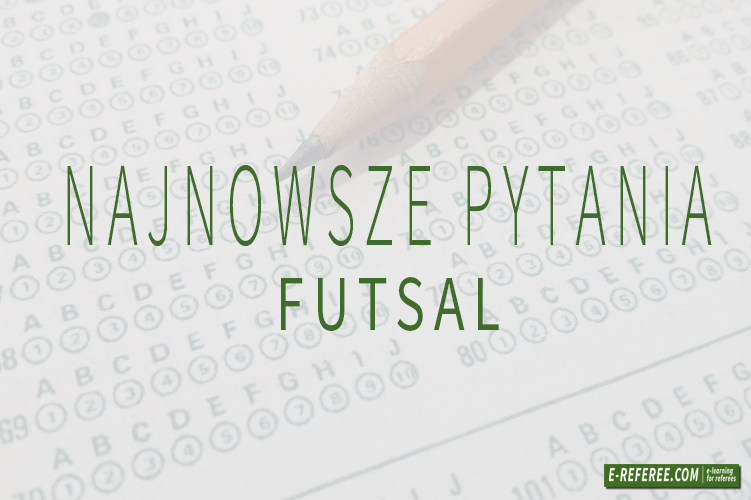
<style>
.page{position:relative;width:751px;height:500px}
.page>*{position:absolute;margin:0}
.t1{font:120px "SourceSansPro-Light";letter-spacing:0.16em;color:#406c2b;scale:0.48 1}
.t2{font:79.9px "SourceSansPro-Regular";letter-spacing:0.16em;color:#406c2b;scale:0.71 1}
</style>
<div class="page">
<p class="t1" style="left:67px;top:165px;width:645px;height:81px">NAJNOWSZE PYTANIA</p>
<p class="t2" style="left:281px;top:277px;width:218px;height:54px">FUTSAL</p>
</div>
